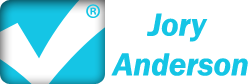
<style>
.page{position:relative;width:249px;height:84px;background:#ffffff}
.page>*{position:absolute;margin:0}
.t1{font:33.1px "FranklinGothic-DemiItalic";color:#15c5e5}
</style>
<div class="page">
<p class="t1" style="left:111px;top:13px;width:137px;height:63px;text-align:center">Jory <br>Anderson</p>
</div>
